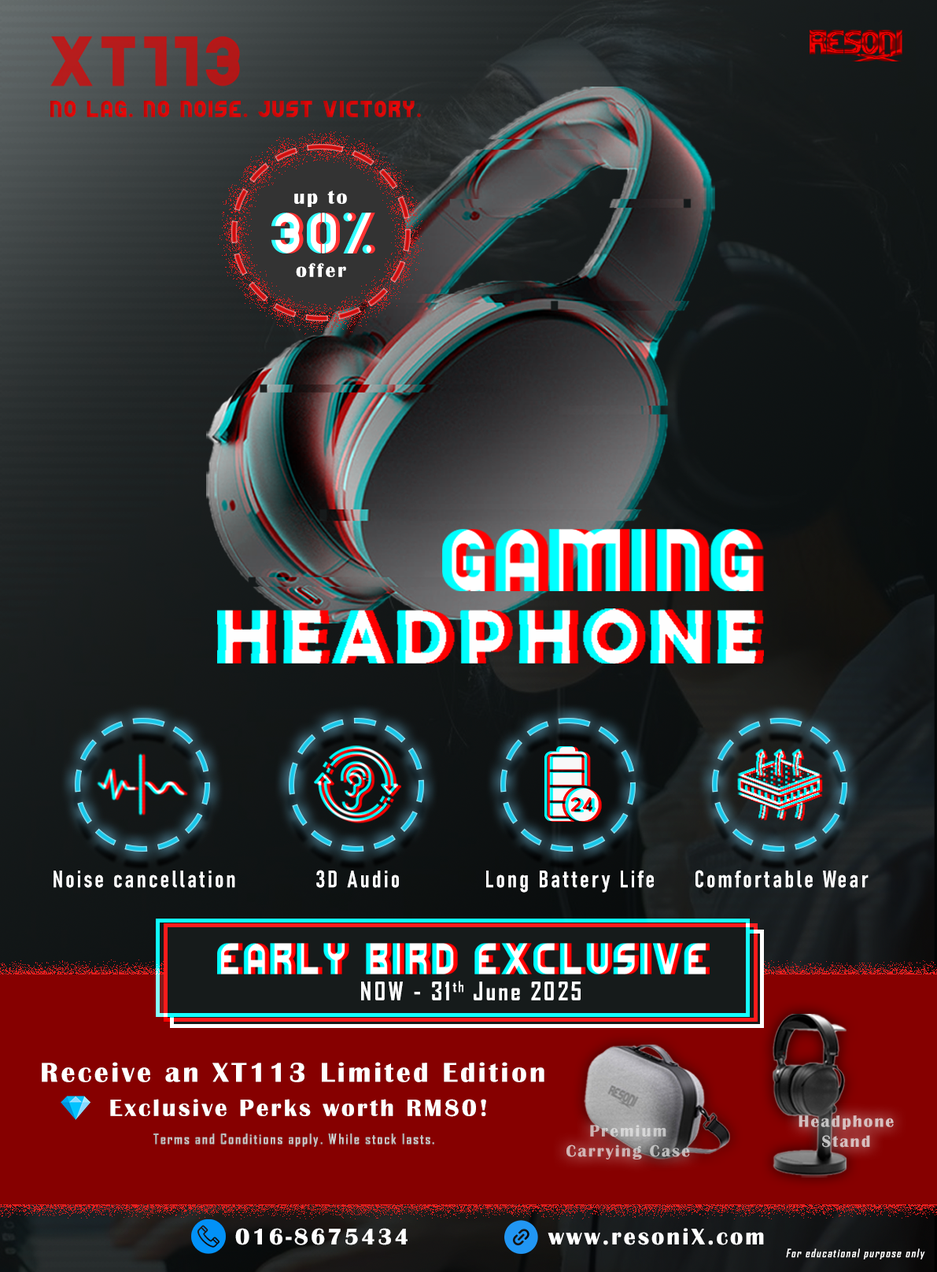
<style>
.page{position:relative;width:937px;height:1272px}
.page>*{position:absolute;margin:0}
.t1{font:18.7px "BERDENGBOLD";letter-spacing:0.1em;color:#d40707}
.t2{font:20.1px "BritannicBold";letter-spacing:0.1em;color:#ffffff}
.t3{font:23.6px "Bahnschrift-SemiBoldCondensed";letter-spacing:0.1em;color:#ffffff;font-style:italic}
.t4{font:24.4px "AgencyFB-Bold";letter-spacing:0.1em;color:#ffffff}
.t5{font:28.1px "BritannicBold";letter-spacing:0.1em;color:#ffffff}
.t6{font:24.4px "BritannicBold";letter-spacing:0.1em;color:#ffffff}
.t7{font:16.7px "BritannicBold";letter-spacing:0.1em;color:#d8bfbf}
.t8{font:13.9px "AgencyFB-Bold";letter-spacing:0.1em;color:#c3c3c3}
.t9{font:16.7px "BritannicBold";letter-spacing:0.1em}
.t10{font:23.6px "BritannicBold";letter-spacing:0.1em;color:#ffffff}
.t11{font:11px "AgencyFB-Bold";letter-spacing:0.1em;color:#ffffff;font-style:italic}
</style>
<div class="page">
<p class="t1" style="left:50px;top:101px;width:371px;height:16px">No Lag. No Noise. Just Victory.</p>
<p class="t2" style="left:294px;top:190px;width:53px;height:17px">up to</p>
<p class="t2" style="left:296px;top:263px;width:50px;height:14px">offer</p>
<p class="t3" style="left:316px;top:870px;width:83px;height:18px">3D Audio</p>
<p class="t3" style="left:696px;top:870px;width:173px;height:18px">Comfortable Wear</p>
<p class="t3" style="left:54px;top:871px;width:181px;height:17px">Noise cancellation</p>
<p class="t3" style="left:486px;top:871px;width:168px;height:22px">Long Battery Life</p>
<p class="t4" style="left:361px;top:981px;width:220px;height:19px">NOW - 31th June 2025</p>
<p class="t5" style="left:42px;top:1062px;width:503px;height:20px">Receive an XT113 Limited Edition</p>
<p class="t6" style="left:110px;top:1099px;width:376px;height:18px">Exclusive Perks worth RM80!</p>
<p class="t7" style="left:799px;top:1115px;width:95px;height:33px;text-align:center">Headphone<br>Stand</p>
<p class="t8" style="left:153px;top:1133px;width:281px;height:14px">Terms and Conditions apply. While stock lasts.</p>
<p class="t9" style="left:567px;top:1125px;width:123px;height:34px;text-align:center">Premium<br>Carrying Case</p>
<p class="t10" style="left:235px;top:1228px;width:173px;height:17px">016-8675434</p>
<p class="t10" style="left:548px;top:1228px;width:216px;height:17px">www.resoniX.com</p>
<p class="t11" style="left:786px;top:1248px;width:140px;height:11px">For educational purpose only</p>
</div>
